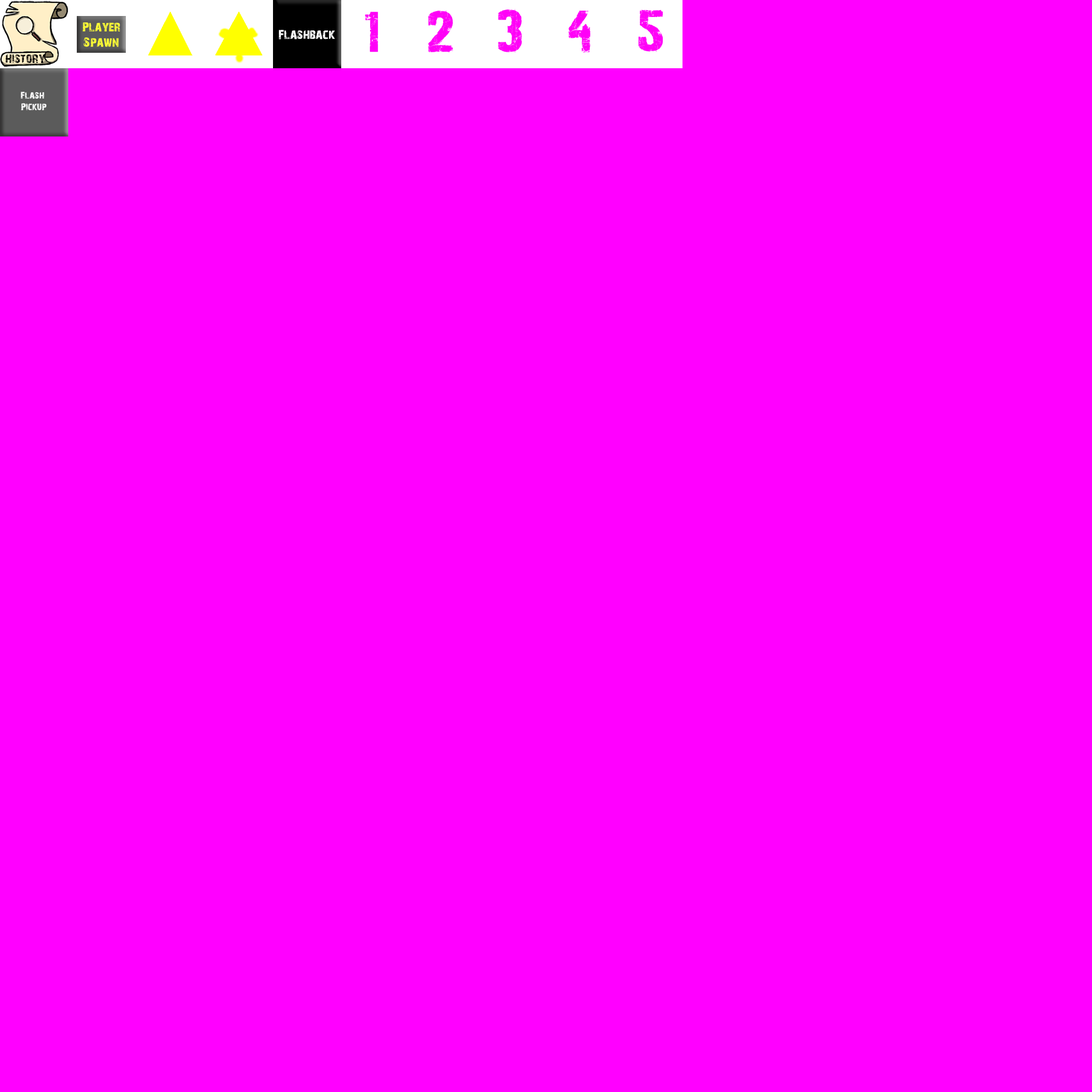
<style>
.page{position:relative;width:1092px;height:1092px;background:#ff00ff}
.page>*{position:absolute;margin:0}
.t1{font:57.1px "28DaysLater";letter-spacing:0.76em;color:#ff00f7}
.t2{font:12.8px "28DaysLater";color:#ffff33}
.t3{font:12.8px "28DaysLater";color:#ffffff}
.t4{font:12.8px "28DaysLater";color:#000000}
.t5{font:9.6px "28DaysLater";color:#ffffff}
</style>
<div class="page">
<p class="t1" style="left:365px;top:9px;width:298px;height:44px">12345</p>
<p class="t2" style="left:83px;top:22px;width:37px;height:25px;text-align:center">Player<br>Spawn</p>
<p class="t3" style="left:279px;top:30px;width:56px;height:9px">Flashback</p>
<p class="t4" style="left:5px;top:54px;width:40px;height:9px">history</p>
<p class="t5" style="left:21px;top:92px;width:25px;height:18px">Flash<br>Pickup</p>
</div>
